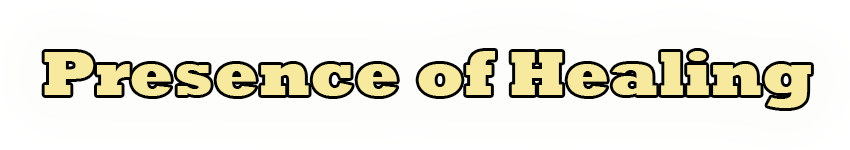
<style>
.page{position:relative;width:850px;height:150px;background:#fdfdfc}
.page>*{position:absolute;margin:0}
.t1{font:64.2px "Rockwell-ExtraBold";color:#f7ea9f}
</style>
<div class="page">
<p class="t1" style="left:44px;top:51px;width:767px;height:57px">Presence of Healing</p>
</div>
